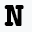
<style>
.page{position:relative;width:32px;height:32px;background:#f7f9fa}
.page>*{position:absolute;margin:0}
.t1{font:32px "AmericanTypewriter-CondensedBold";color:#000000}
</style>
<div class="page">
<p class="t1" style="left:4px;top:5px;width:20px;height:21px">N</p>
</div>
